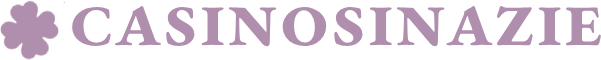
<style>
.page{position:relative;width:601px;height:60px;background:#ffffff}
.page>*{position:absolute;margin:0}
.t1{font:83px "EBGaramond-SemiBold";color:#b08ead;font-variant:small-caps}
</style>
<div class="page">
<p class="t1" style="left:72px;top:5px;width:529px;height:42px">casinosinazie</p>
</div>
